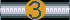
<style>
.page{position:relative;width:70px;height:20px}
.page>*{position:absolute;margin:0}
.t1{font:25px "ArialMT";color:#145196}
</style>
<div class="page">
<p class="t1" style="left:29px;top:1px;width:12px;height:18px">3</p>
</div>
